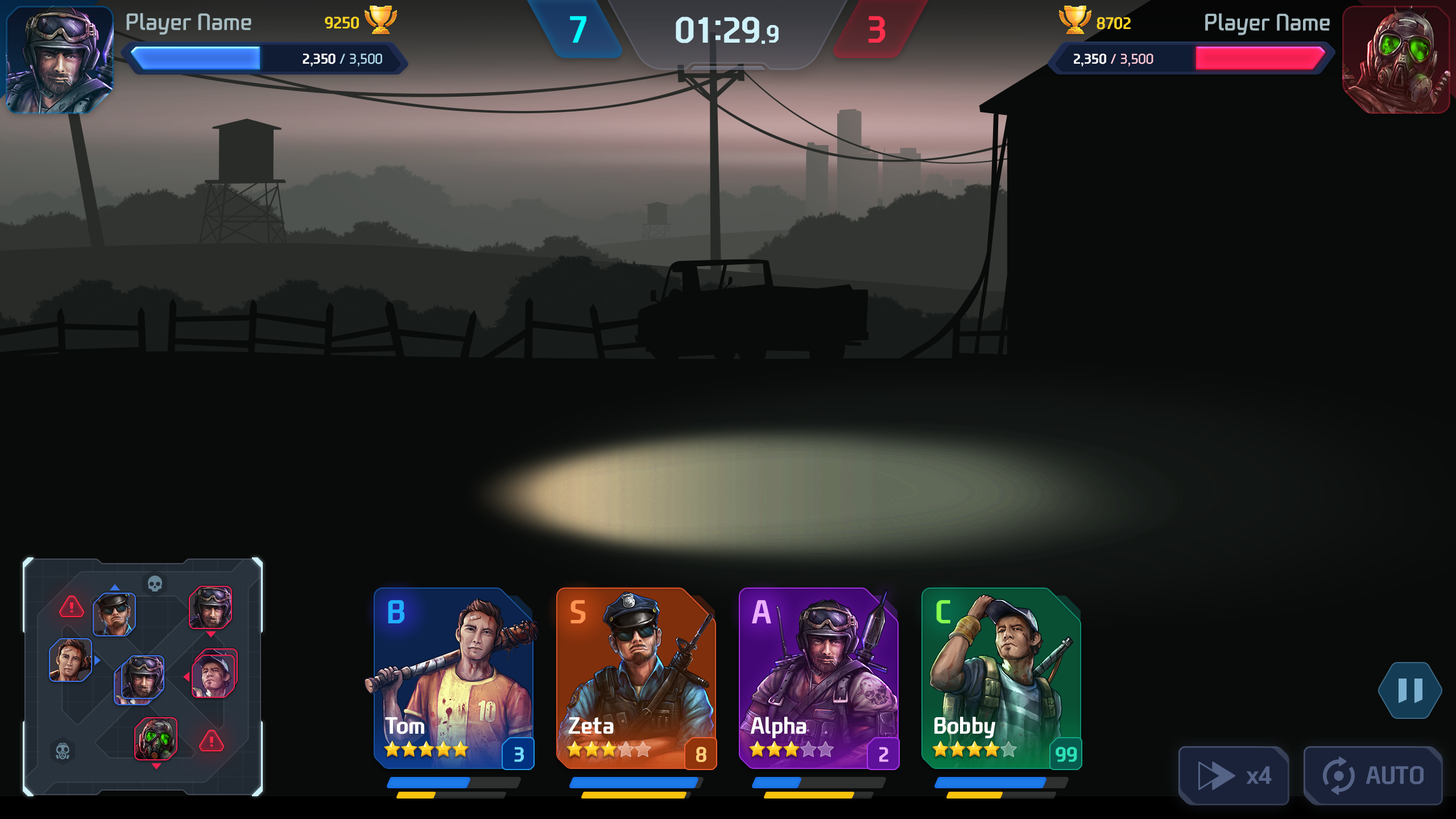
<style>
.page{position:relative;width:1456px;height:819px;background:#090b0a}
.page>*{position:absolute;margin:0}
.t1{font:22.7px "NEXONFootballGothicL";color:#a7bcc2}
.t2{font:15.9px "NEXONFootballGothicB";color:#ffd323}
.t3{font:36.4px "NEXONFootballGothicB";color:#00ffff;text-transform:uppercase}
.t4{font:34.9px "NEXONFootballGothicB";color:#cff1fa;text-transform:uppercase}
.t5{font:24px "NEXONFootballGothicB";color:#cff1fa;text-transform:uppercase}
.t6{font:36.4px "NEXONFootballGothicB";color:#ff2f4c;text-transform:uppercase}
.t7{font:16.2px "NEXONFootballGothicB";color:#ffd323}
.t8{font:22.9px "NEXONFootballGothicL";color:#a7bcc2}
.t9{font:13.7px "NEXONFootballGothicL";color:#afd9e9}
.t10{font:13.7px "NEXONFootballGothicB";color:#ffffff}
.t11{font:13.6px "NEXONFootballGothicL";color:#ffc9d6}
.t12{font:13.6px "NEXONFootballGothicB";color:#ffffff}
.t13{font:31.8px "NEXONFootballGothicB";letter-spacing:-0.02em;color:#21aeff;text-transform:uppercase}
.t14{font:31.8px "NEXONFootballGothicB";letter-spacing:-0.02em;color:#ff9454;text-transform:uppercase}
.t15{font:31.8px "NEXONFootballGothicB";letter-spacing:-0.02em;color:#ecaeff;text-transform:uppercase}
.t16{font:31.8px "NEXONFootballGothicB";letter-spacing:-0.02em;color:#85fc50;text-transform:uppercase}
.t17{font:22.7px "NEXONFootballGothicB";color:#ffffff}
.t18{font:19.9px "NEXONFootballGothicB";color:#73dcff}
.t19{font:19.9px "NEXONFootballGothicB";color:#ffce7a}
.t20{font:19.9px "NEXONFootballGothicB";color:#ecaeff}
.t21{font:19.9px "NEXONFootballGothicB";color:#2ddfb7}
.t22{font:23.9px "NEXONFootballGothicB";color:#556387}
</style>
<div class="page">
<p class="t1" style="left:126px;top:13px;width:125px;height:22px">Player Name</p>
<p class="t2" style="left:325px;top:16px;width:34px;height:13px">9250</p>
<p class="t3" style="left:570px;top:16px;width:16px;height:27px">7</p>
<p class="t4" style="left:676px;top:16px;width:103px;height:28px">01:29<span class="t5">.9</span></p>
<p class="t6" style="left:868px;top:16px;width:18px;height:27px">3</p>
<p class="t7" style="left:1097px;top:17px;width:34px;height:13px">8702</p>
<p class="t8" style="left:1205px;top:13px;width:125px;height:22px">Player Name</p>
<p class="t9" style="left:303px;top:53px;width:79px;height:14px"><span class="t10">2,350 </span>/ 3,500</p>
<p class="t11" style="left:1074px;top:53px;width:79px;height:14px"><span class="t12">2,350 </span>/ 3,500</p>
<p class="t13" style="left:388px;top:600px;width:16px;height:23px">B</p>
<p class="t14" style="left:570px;top:600px;width:16px;height:23px">s</p>
<p class="t15" style="left:752px;top:600px;width:19px;height:23px">A</p>
<p class="t16" style="left:936px;top:600px;width:14px;height:23px">C</p>
<p class="t17" style="left:385px;top:717px;width:39px;height:17px">Tom</p>
<p class="t17" style="left:569px;top:717px;width:45px;height:17px">Zeta</p>
<p class="t17" style="left:750px;top:717px;width:56px;height:21px">Alpha</p>
<p class="t17" style="left:934px;top:717px;width:61px;height:21px">Bobby</p>
<p class="t18" style="left:514px;top:747px;width:10px;height:15px">3</p>
<p class="t19" style="left:696px;top:747px;width:10px;height:15px">8</p>
<p class="t20" style="left:879px;top:747px;width:9px;height:15px">2</p>
<p class="t21" style="left:1056px;top:747px;width:21px;height:15px">99</p>
<p class="t22" style="left:1246px;top:766px;width:26px;height:18px">x4</p>
<p class="t22" style="left:1366px;top:766px;width:58px;height:18px">AUTO</p>
</div>
